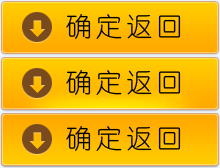
<style>
.page{position:relative;width:220px;height:168px}
.page>*{position:absolute;margin:0}
.t1{font:26px "YouYuan";letter-spacing:0.16em;color:#000000}
</style>
<div class="page">
<p class="t1" style="left:66px;top:14px;width:115px;height:25px">确定返回</p>
<p class="t1" style="left:66px;top:70px;width:115px;height:25px">确定返回</p>
<p class="t1" style="left:66px;top:126px;width:115px;height:25px">确定返回</p>
</div>
